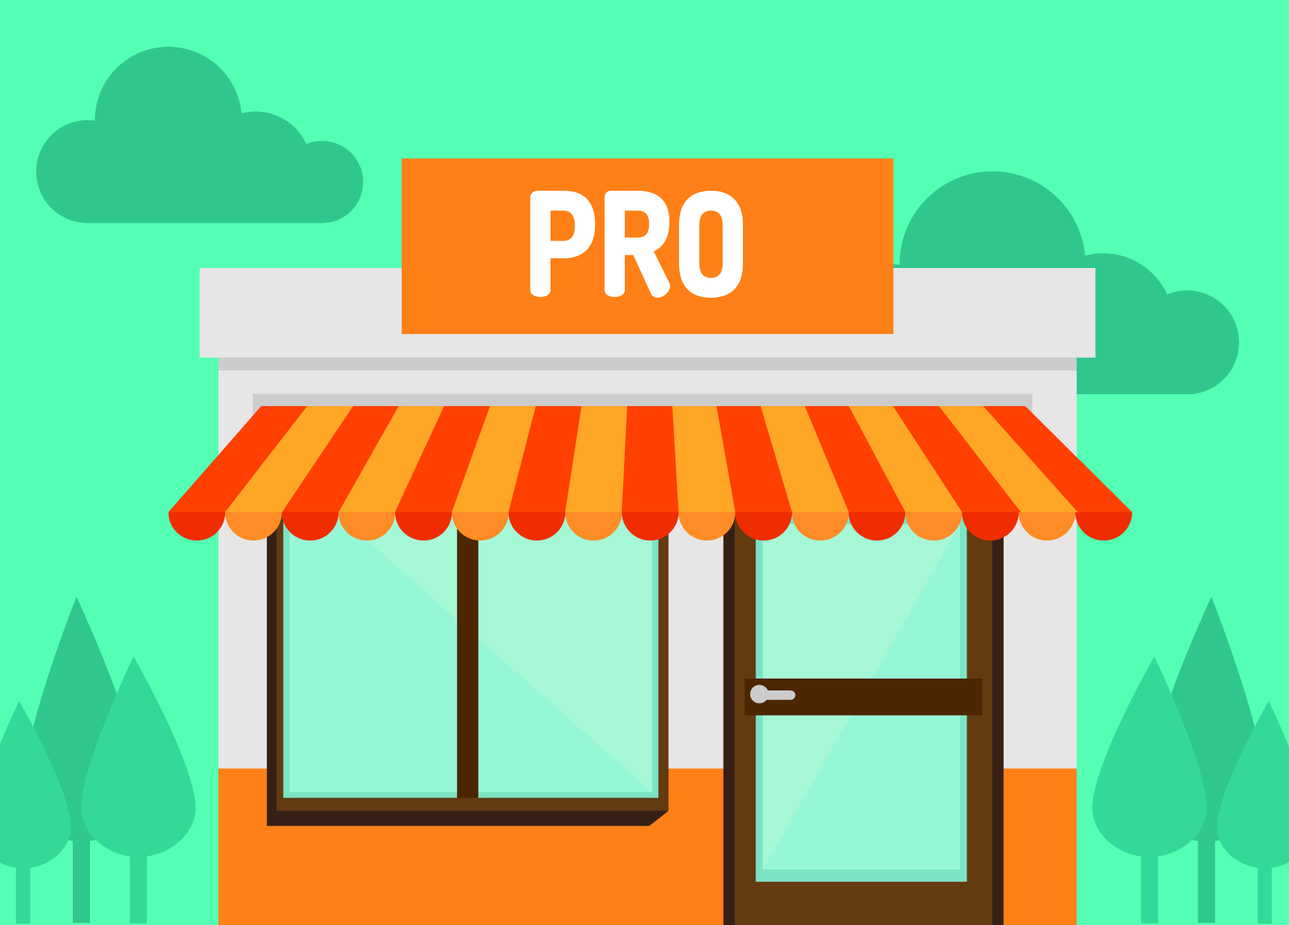
<style>
.page{position:relative;width:1289px;height:925px;background:#54ffb3}
.page>*{position:absolute;margin:0}
.t1{font:145.6px "Dosis-ExtraBold";color:#ffffff;text-transform:uppercase;scale:0.89 1}
</style>
<div class="page">
<p class="t1" style="left:530px;top:190px;width:213px;height:109px">PRO</p>
</div>
